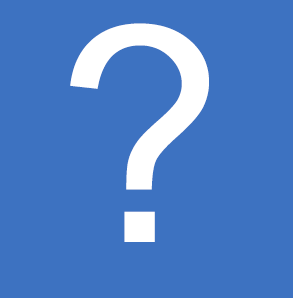
<style>
.page{position:relative;width:293px;height:298px;background:#3d72c1}
.page>*{position:absolute;margin:0}
.t1{font:300px "ArialUnicodeMS";color:#ffffff}
</style>
<div class="page">
<p class="t1" style="left:70px;top:23px;width:139px;height:219px">?</p>
</div>
